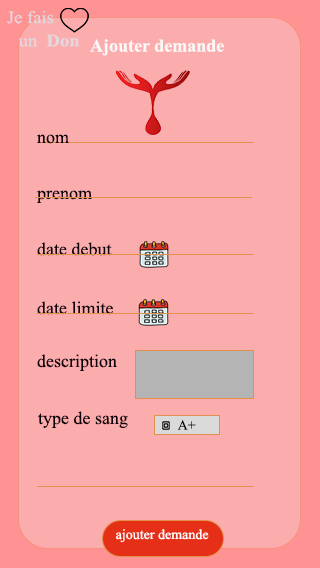
<style>
.page{position:relative;width:320px;height:568px;background:#fbacac}
.page>*{position:absolute;margin:0}
.t1{font:18px "TimesNewRomanPS-BoldMT";color:#f9f7f7}
.t2{font:18px "TimesNewRomanPSMT";color:#f9f7f7}
.t3{font:18px "TimesNewRomanPSMT";color:#0c0109}
.t4{font:14px "TimesNewRomanPSMT";color:#0c0109}
.t5{font:14px "TimesNewRomanPSMT";color:#ffffff}
</style>
<div class="page">
<p class="t1" style="left:90px;top:39px;width:134px;height:17px"><span class="t2">   </span>Ajouter demande</p>
<p class="t3" style="left:37px;top:134px;width:32px;height:10px">nom</p>
<p class="t3" style="left:37px;top:190px;width:55px;height:13px">prenom</p>
<p class="t3" style="left:37px;top:242px;width:75px;height:14px">date debut</p>
<p class="t3" style="left:37px;top:301px;width:76px;height:14px">date limite</p>
<p class="t3" style="left:37px;top:354px;width:80px;height:17px">description</p>
<p class="t3" style="left:38px;top:411px;width:90px;height:17px">type de sang</p>
<p class="t4" style="left:177px;top:420px;width:19px;height:10px">A+</p>
<p class="t5" style="left:116px;top:529px;width:93px;height:14px">ajouter demande</p>
</div>
